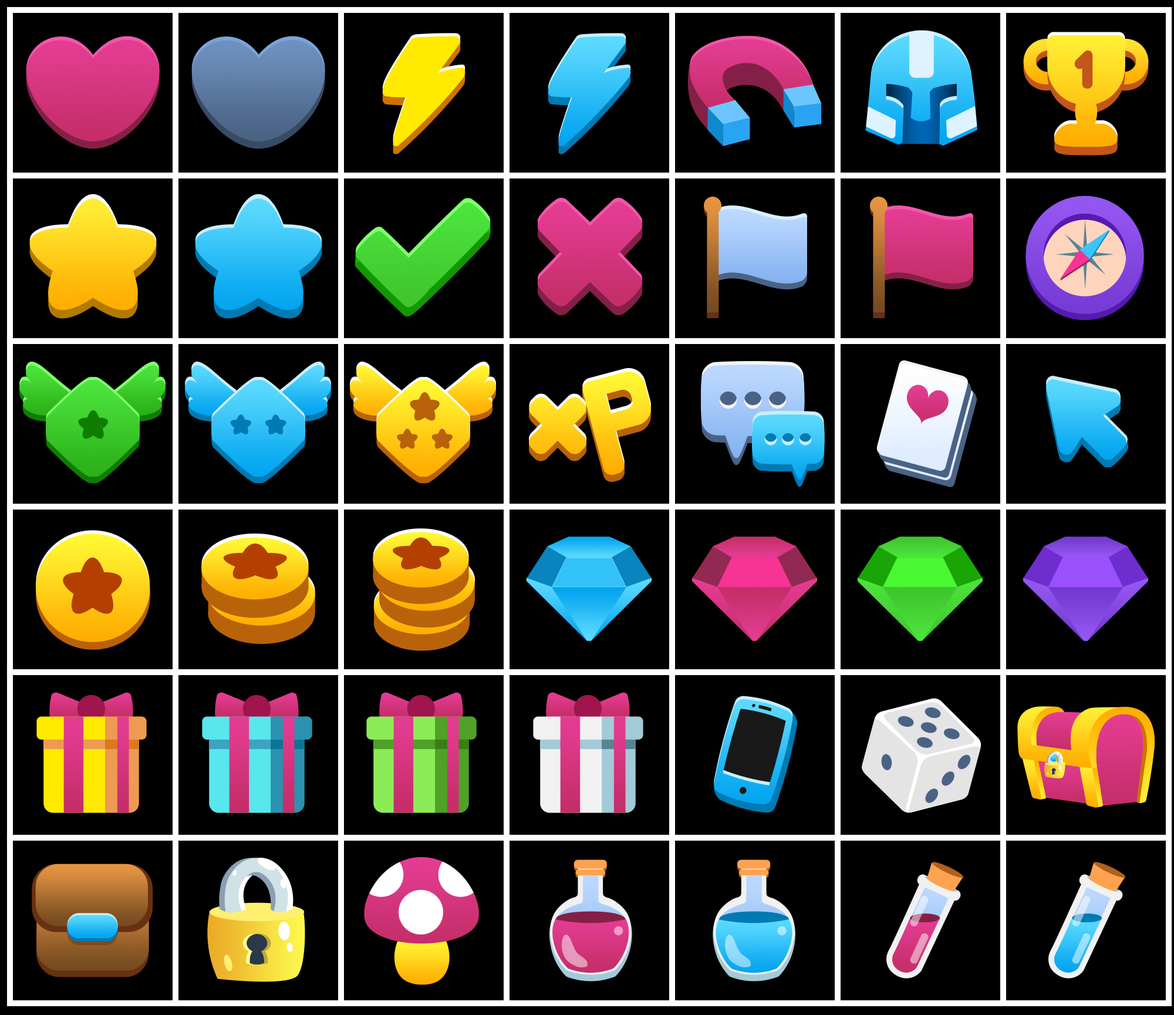
<style>
.page{position:relative;width:1174px;height:1015px;background:#000000}
.page>*{position:absolute;margin:0}
.t1{font:54px "Junegull-Regular";color:#c2561b}
</style>
<div class="page">
<p class="t1" style="left:1075px;top:51px;width:18px;height:38px">1</p>
</div>
